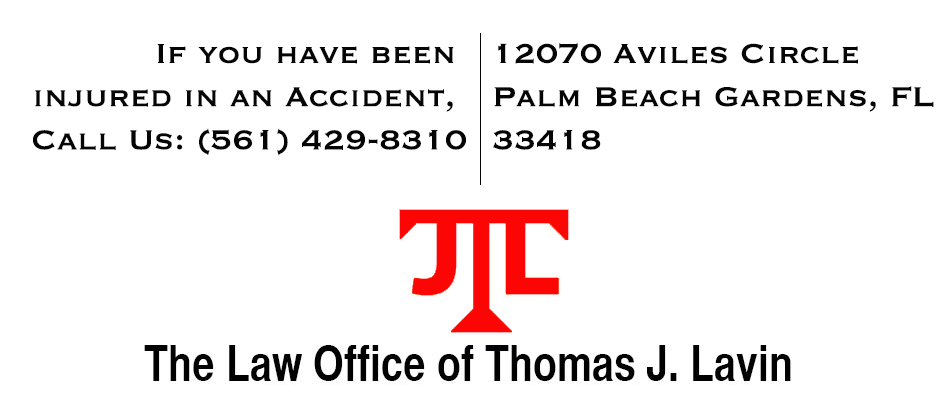
<style>
.page{position:relative;width:950px;height:400px;background:#ffffff}
.page>*{position:absolute;margin:0}
.t1{font:36px "Copperplate";color:#050505}
</style>
<div class="page">
<p class="t1" style="left:33px;top:44px;width:433px;height:112px;text-align:right">If you have been <br>injured in an Accident, <br>Call Us: (561) 429-8310</p>
<p class="t1" style="left:493px;top:43px;width:441px;height:107px">12070 Aviles Circle <br>Palm Beach Gardens, FL <br>33418</p>
</div>
